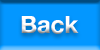
<style>
.page{position:relative;width:100px;height:50px;background:#0397ff}
.page>*{position:absolute;margin:0}
.t1{font:24px "HelveticaNeue-Bold";color:#ffffff}
</style>
<div class="page">
<p class="t1" style="left:21px;top:16px;width:58px;height:18px">Back</p>
</div>
